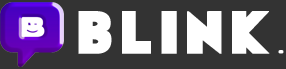
<style>
.page{position:relative;width:286px;height:69px;background:#333333}
.page>*{position:absolute;margin:0}
.t1{font:60px "Viafont";letter-spacing:0.075em;color:#ffffff;font-weight:bold}
.t2{font:36px "TimesNewRomanPSMT";letter-spacing:0.075em;color:#ffffff;font-weight:bold}
</style>
<div class="page">
<p class="t1" style="left:78px;top:11px;width:206px;height:43px">Blink<span class="t2">.</span></p>
</div>
